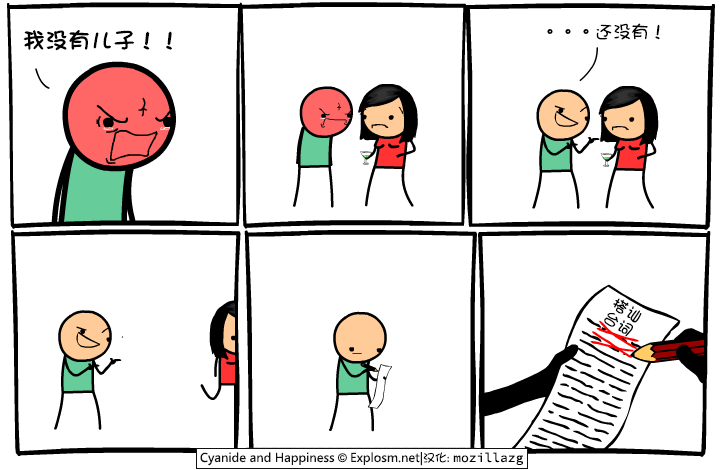
<style>
.page{position:relative;width:720px;height:470px;background:#ffffff}
.page>*{position:absolute;margin:0}
.t1{font:22px "DFGirl";color:#000000;font-weight:bold}
.t2{font:18px "DFGirl";color:#000000}
.t3{font:16px/16px "DFGirl";color:#000000}
</style>
<div class="page">
<p class="t1" style="left:23px;top:30px;width:149px;height:21px">我没有儿子！！</p>
<p class="t2" style="left:547px;top:23px;width:113px;height:17px">。。。还没有！</p>
<p class="t3" style="left:604px;top:298px;width:38px;height:39px;rotate:32deg">搭讪<br>台词</p>
</div>
